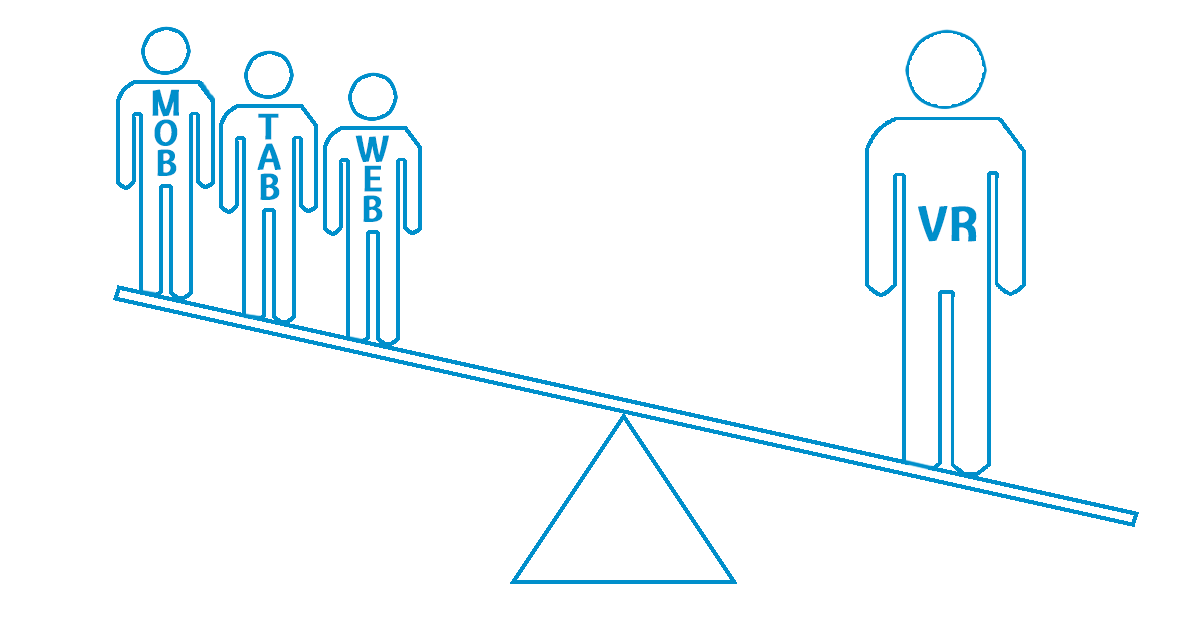
<style>
.page{position:relative;width:1200px;height:619px;background:#ffffff}
.page>*{position:absolute;margin:0}
.t1{font:36px/30px "CantoraOne-Regular";letter-spacing:-0.01em;color:#008fcb;font-weight:bold}
.t2{font:48px "CantoraOne-Regular";letter-spacing:-0.01em;color:#008fcb;font-weight:bold}
</style>
<div class="page">
<p class="t1" style="left:152px;top:89px;width:27px;height:87px;text-align:center">M<br>O<br>B</p>
<p class="t1" style="left:257px;top:113px;width:24px;height:87px;text-align:center">T<br>A<br>B</p>
<p class="t1" style="left:355px;top:135px;width:34px;height:87px;text-align:center">W<br>E<br>B</p>
<p class="t2" style="left:918px;top:206px;width:59px;height:36px">VR</p>
</div>
